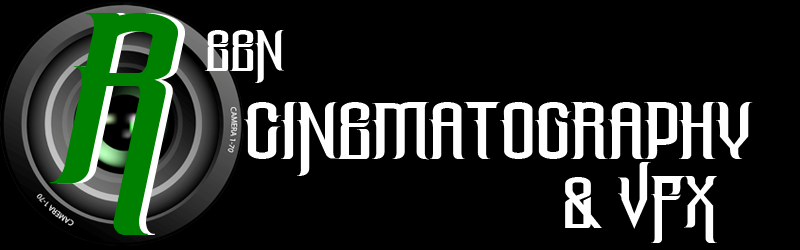
<style>
.page{position:relative;width:800px;height:250px;background:#000000}
.page>*{position:absolute;margin:0}
.t1{font:299.9px "TheLostCanyon-Italic";color:#008000}
.t2{font:72px "TheLostCanyon";color:#fefefe}
.t3{font:100px "TheLostCanyon";color:#fefefe}
.t4{font:90px "TheLostCanyon";color:#fefefe}
</style>
<div class="page">
<p class="t1" style="left:50px;top:13px;width:128px;height:222px">R</p>
<p class="t1" style="left:57px;top:13px;width:128px;height:222px">R</p>
<p class="t2" style="left:204px;top:30px;width:80px;height:53px">een</p>
<p class="t3" style="left:244px;top:102px;width:509px;height:74px">Cinematography</p>
<p class="t4" style="left:565px;top:162px;width:152px;height:81px">&amp; VFX</p>
</div>
